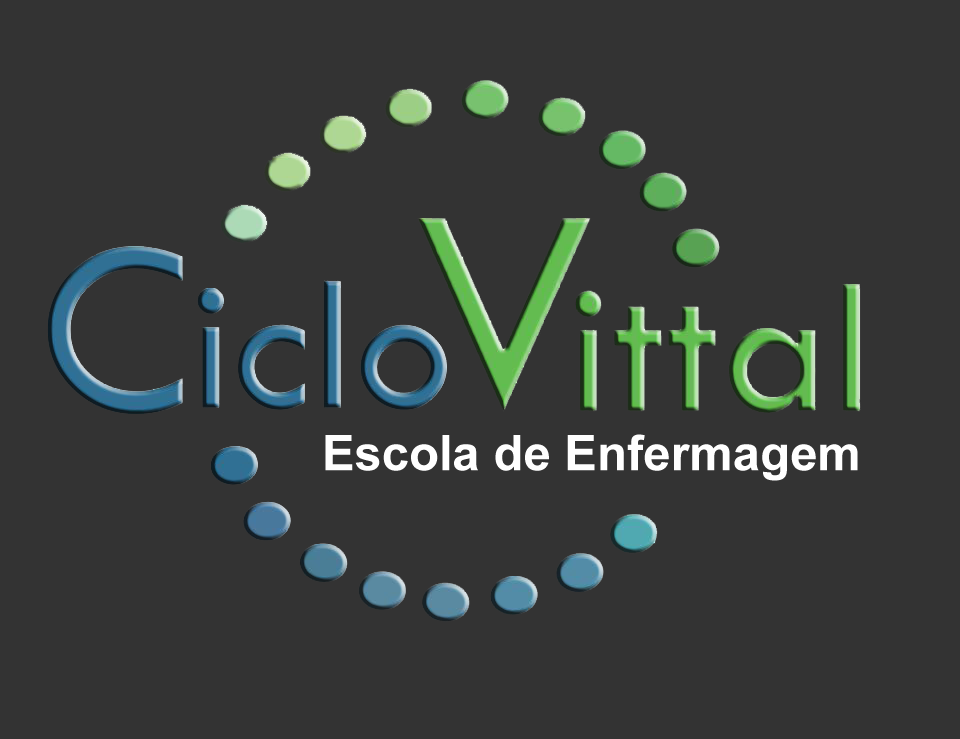
<style>
.page{position:relative;width:960px;height:739px;background:#333333}
.page>*{position:absolute;margin:0}
.t1{font:49px "Arial-BoldMT";color:#ffffff}
</style>
<div class="page">
<p class="t1" style="left:325px;top:434px;width:533px;height:47px">Escola de Enfermagem</p>
</div>
